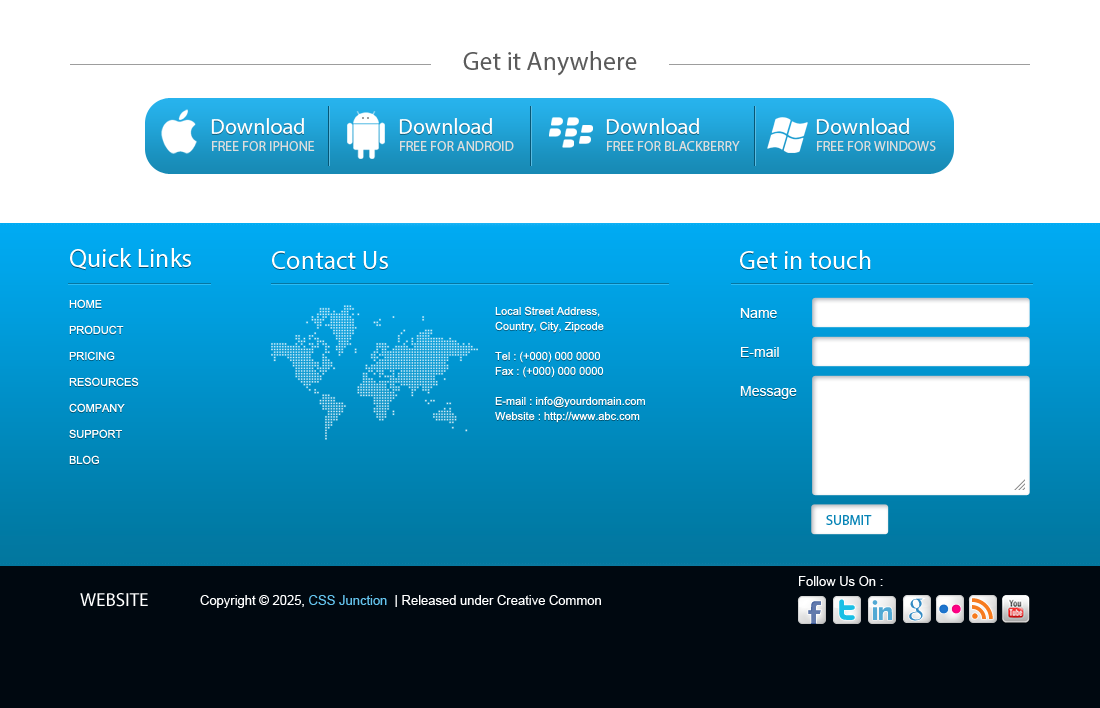
<style>
.page{position:relative;width:1100px;height:708px;background:#ffffff}
.page>*{position:absolute;margin:0}
.t1{font:26px "MyriadPro-Regular";color:#5b5b5b}
.t2{font:22px "MyriadPro-Regular";color:#ffffff}
.t3{font:14px "MyriadPro-Regular";color:#dcdcdc}
.t4{font:26px "MyriadPro-Regular";color:#ffffff}
.t5{font:11px/26px "ArialMT";color:#ffffff;text-transform:uppercase}
.t6{font:11px/15px "ArialMT";color:#ffffff}
.t7{font:14px "ArialMT";color:#ffffff}
.t8{font:14px "MyriadPro-Regular";color:#0784b6}
.t9{font:13px "ArialMT";color:#ffffff}
.t10{font:19px "MyriadPro-Regular";color:#ffffff;text-transform:uppercase}
.t11{font:13px "ArialMT";color:#64c3ed}
</style>
<div class="page">
<p class="t1" style="left:463px;top:51px;width:174px;height:25px">Get it Anywhere</p>
<p class="t2" style="left:211px;top:118px;width:93px;height:16px">Download</p>
<p class="t2" style="left:399px;top:118px;width:93px;height:16px">Download</p>
<p class="t2" style="left:606px;top:118px;width:93px;height:16px">Download</p>
<p class="t2" style="left:816px;top:118px;width:93px;height:16px">Download</p>
<p class="t3" style="left:212px;top:141px;width:103px;height:10px">FREE FOR IPHONE</p>
<p class="t3" style="left:400px;top:141px;width:114px;height:10px">FREE FOR ANDROID</p>
<p class="t3" style="left:607px;top:141px;width:133px;height:10px">FREE FOR BLACKBERRY</p>
<p class="t3" style="left:817px;top:141px;width:119px;height:10px">FREE FOR WINDOWS</p>
<p class="t4" style="left:70px;top:248px;width:121px;height:22px">Quick Links</p>
<p class="t4" style="left:272px;top:251px;width:116px;height:18px">Contact Us</p>
<p class="t4" style="left:740px;top:250px;width:131px;height:19px">Get in touch</p>
<p class="t5" style="left:69px;top:299px;width:70px;height:166px">Home<br>Product<br>Pricing<br>Resources<br>Company<br>Support<br>Blog</p>
<p class="t6" style="left:495px;top:306px;width:150px;height:117px">Local Street Address,<br>Country, City, Zipcode<br><br>Tel : (+000) 000 0000<br>Fax : (+000) 000 0000<br><br>E-mail : info@yourdomain.com<br>Website : http://www.abc.com</p>
<p class="t7" style="left:740px;top:308px;width:37px;height:10px">Name</p>
<p class="t7" style="left:741px;top:347px;width:38px;height:10px">E-mail</p>
<p class="t7" style="left:740px;top:386px;width:57px;height:13px">Message</p>
<p class="t8" style="left:826px;top:515px;width:46px;height:10px">SUBMIT</p>
<p class="t9" style="left:799px;top:576px;width:84px;height:10px">Follow Us On :</p>
<p class="t10" style="left:80px;top:593px;width:68px;height:14px">Website</p>
<p class="t9" style="left:200px;top:595px;width:401px;height:13px">Copyright © 2025, <span class="t11">CSS Junction</span>  | Released under Creative Common</p>
</div>
